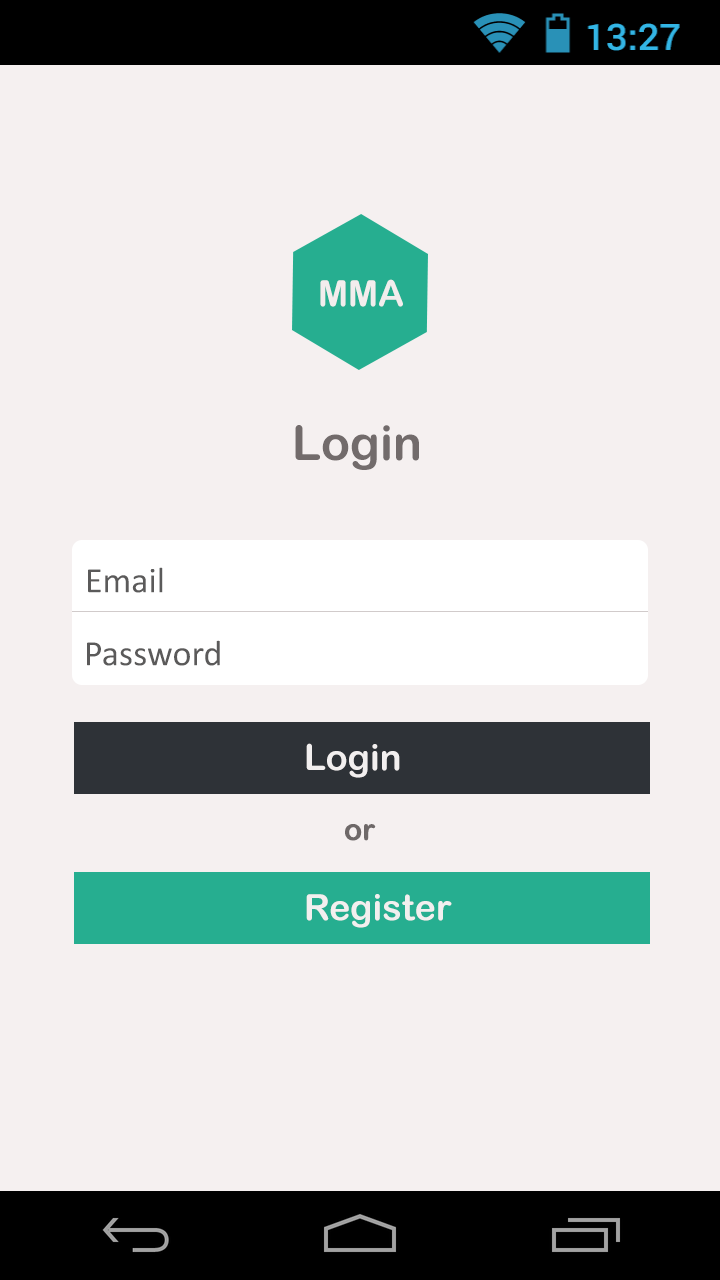
<style>
.page{position:relative;width:720px;height:1280px;background:#f5f0f0}
.page>*{position:absolute;margin:0}
.t1{font:36px "ArialRoundedMTBold";color:#f2eded}
.t2{font:48px "ArialRoundedMTBold";color:#726b6b}
.t3{font:36px "Calibri";color:#5b5a5a}
.t4{font:36px "ArialRoundedMTBold";color:#f2efef}
.t5{font:30px "ArialRoundedMTBold";color:#6e6868}
</style>
<div class="page">
<p class="t1" style="left:320px;top:279px;width:83px;height:28px">MMA</p>
<p class="t2" style="left:295px;top:425px;width:124px;height:45px">Login</p>
<p class="t3" style="left:88px;top:567px;width:75px;height:26px">Email</p>
<p class="t3" style="left:87px;top:640px;width:133px;height:26px">Password</p>
<p class="t4" style="left:306px;top:743px;width:94px;height:35px">Login</p>
<p class="t5" style="left:345px;top:824px;width:31px;height:17px">or</p>
<p class="t4" style="left:306px;top:894px;width:146px;height:34px">Register</p>
</div>
